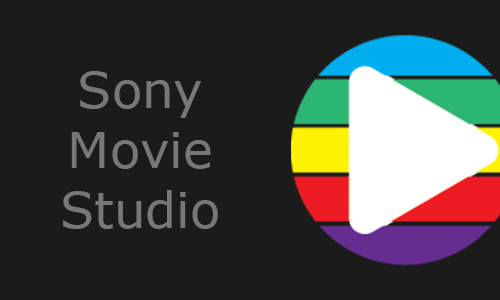
<style>
.page{position:relative;width:500px;height:300px;background:#1b1b1b}
.page>*{position:absolute;margin:0}
.t1{font:50px "Verdana";color:#777777}
</style>
<div class="page">
<p class="t1" style="left:63px;top:71px;width:155px;height:158px;text-align:center">Sony<br>Movie<br>Studio</p>
</div>
